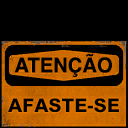
<style>
.page{position:relative;width:128px;height:128px;background:#000000}
.page>*{position:absolute;margin:0}
.t1{font:20.3px "Helvetica-Bold";color:#000000;text-transform:uppercase}
.t2{font:18.7px "MHeiPRC-Xbold";color:#000000;text-transform:uppercase}
</style>
<div class="page">
<p class="t1" style="left:14px;top:53px;width:98px;height:24px">atenção</p>
<p class="t2" style="left:8px;top:98px;width:111px;height:15px">afaste-se</p>
</div>
